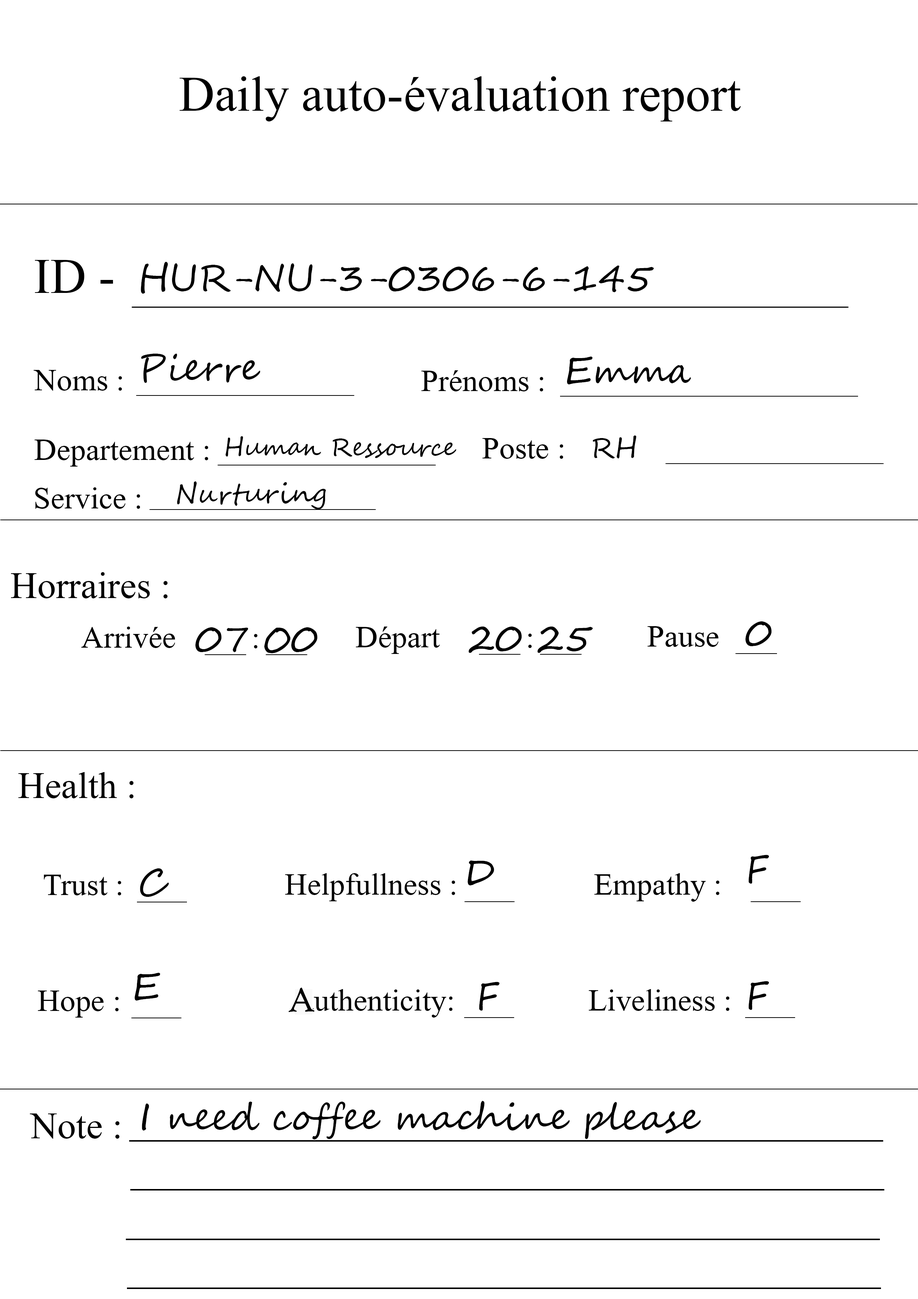
<style>
.page{position:relative;width:918px;height:1299px;background:#ffffff}
.page>*{position:absolute;margin:0}
.t1{font:74px "Microsoft-Himalaya";color:#000000}
.t2{font:37px "SegoeScript";color:#000000}
.t3{font:46.3px "Microsoft-Himalaya";color:#000000}
.t4{font:24.7px "SegoeScript";color:#000000}
.t5{font:27.8px "SegoeScript";color:#000000}
.t6{font:55.5px "Microsoft-Himalaya";color:#000000}
.t7{font:37px "HighTowerText-Reg";color:#000000}
</style>
<div class="page">
<p class="t1" style="left:180px;top:76px;width:561px;height:45px">Daily auto-évaluation report</p>
<p class="t1" style="left:35px;top:260px;width:78px;height:33px">ID -</p>
<p class="t2" style="left:141px;top:262px;width:513px;height:32px">HUR-NU-3-0306-6-145</p>
<p class="t2" style="left:141px;top:354px;width:119px;height:29px">Pierre</p>
<p class="t2" style="left:567px;top:357px;width:124px;height:27px">Emma</p>
<p class="t3" style="left:34px;top:370px;width:88px;height:21px">Noms :</p>
<p class="t3" style="left:421px;top:370px;width:122px;height:21px">Prénoms :</p>
<p class="t4" style="left:225px;top:436px;width:231px;height:22px">Human Ressource</p>
<p class="t3" style="left:482px;top:438px;width:81px;height:21px">Poste :</p>
<p class="t5" style="left:593px;top:435px;width:43px;height:23px">RH</p>
<p class="t3" style="left:34px;top:439px;width:174px;height:27px">Departement :</p>
<p class="t5" style="left:177px;top:481px;width:149px;height:28px">Nurturing</p>
<p class="t3" style="left:35px;top:487px;width:105px;height:22px">Service :</p>
<p class="t6" style="left:11px;top:572px;width:157px;height:26px">Horraires :</p>
<p class="t3" style="left:81px;top:626px;width:94px;height:22px">Arrivée</p>
<p class="t2" style="left:195px;top:627px;width:123px;height:26px">07 00</p>
<p class="t3" style="left:356px;top:626px;width:84px;height:28px">Départ</p>
<p class="t2" style="left:469px;top:626px;width:124px;height:27px">20 25</p>
<p class="t3" style="left:648px;top:626px;width:71px;height:21px">Pause</p>
<p class="t2" style="left:746px;top:621px;width:26px;height:25px">0</p>
<p class="t3" style="left:254px;top:634px;width:4px;height:14px">:</p>
<p class="t3" style="left:528px;top:633px;width:4px;height:15px">:</p>
<p class="t6" style="left:18px;top:772px;width:116px;height:26px">Health :</p>
<p class="t2" style="left:749px;top:854px;width:20px;height:30px">F</p>
<p class="t2" style="left:140px;top:868px;width:29px;height:29px">C</p>
<p class="t2" style="left:468px;top:860px;width:26px;height:25px">D</p>
<p class="t3" style="left:44px;top:874px;width:77px;height:21px">Trust :</p>
<p class="t3" style="left:285px;top:873px;width:170px;height:28px">Helpfullness :</p>
<p class="t3" style="left:594px;top:873px;width:126px;height:28px">Empathy :</p>
<p class="t2" style="left:134px;top:973px;width:26px;height:27px">E</p>
<p class="t7" style="left:288px;top:987px;width:27px;height:25px">A</p>
<p class="t3" style="left:301px;top:989px;width:152px;height:28px">authenticity:</p>
<p class="t2" style="left:479px;top:981px;width:21px;height:30px">F</p>
<p class="t3" style="left:589px;top:989px;width:141px;height:22px">Liveliness :</p>
<p class="t2" style="left:749px;top:981px;width:20px;height:29px">F</p>
<p class="t3" style="left:38px;top:990px;width:81px;height:27px">Hope :</p>
<p class="t2" style="left:142px;top:1101px;width:559px;height:38px">I need coffee machine please</p>
<p class="t6" style="left:30px;top:1113px;width:90px;height:25px">Note :</p>
</div>
